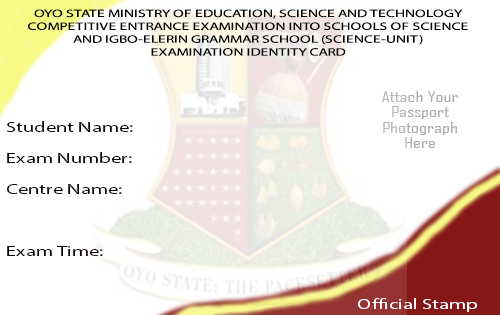
<style>
.page{position:relative;width:500px;height:315px;background:#ffffff}
.page>*{position:absolute;margin:0}
.t1{font:10.8px/12.9px "MyriadPro-Regular";color:#000000;scale:1.43 1}
.t2{font:14.4px/15.4px "AgencyFB-Reg";color:#abaaa9;scale:1.43 1}
.t3{font:14.4px/30.9px "MyriadPro-Regular";color:#0a0201;scale:1.43 1}
.t4{font:14.4px "MyriadPro-Regular";color:#ffffff;scale:1.43 1}
</style>
<div class="page">
<p class="t1" style="left:28px;top:9px;width:440px;height:47px;text-align:center">OYO STATE MINISTRY OF EDUCATION, SCIENCE AND TECHNOLOGY<br>COMPETITIVE ENTRANCE EXAMINATION INTO SCHOOLS OF SCIENCE<br>AND IGBO-ELERIN GRAMMAR SCHOOL (SCIENCE-UNIT)<br>EXAMINATION IDENTITY CARD</p>
<p class="t2" style="left:382px;top:91px;width:76px;height:57px;text-align:center">Attach Your<br>Passport<br>Photograph<br>Here</p>
<p class="t3" style="left:7px;top:121px;width:126px;height:135px">Student Name:<br>Exam Number:<br>Centre Name:<br><br>Exam Time:</p>
<p class="t4" style="left:358px;top:298px;width:119px;height:14px">Official Stamp</p>
</div>
